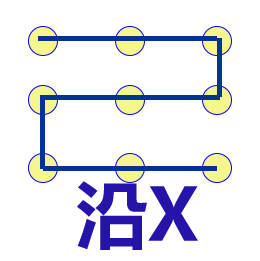
<style>
.page{position:relative;width:260px;height:261px;background:#ffffff}
.page>*{position:absolute;margin:0}
.t1{font:72px "MicrosoftYaHei-Bold";color:#2513aa}
</style>
<div class="page">
<p class="t1" style="left:77px;top:181px;width:121px;height:69px">沿X</p>
</div>
